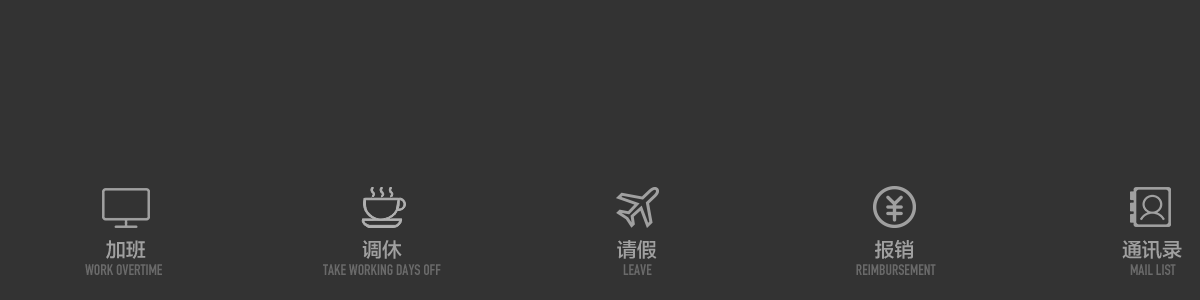
<style>
.page{position:relative;width:1200px;height:300px;background:#333333}
.page>*{position:absolute;margin:0}
.t1{font:20px "FZLTZHK--GBK1-0";color:#a0a0a0;text-transform:uppercase}
.t2{font:15.1px "DINEngschriftStd";color:#6a6a6a;text-transform:uppercase}
.t3{font:15px "DINEngschriftStd";color:#6a6a6a;text-transform:uppercase}
</style>
<div class="page">
<p class="t1" style="left:106px;top:240px;width:40px;height:19px">加班</p>
<p class="t1" style="left:362px;top:240px;width:40px;height:19px">调休</p>
<p class="t1" style="left:617px;top:240px;width:40px;height:19px">请假</p>
<p class="t1" style="left:875px;top:240px;width:39px;height:19px">报销</p>
<p class="t1" style="left:1122px;top:240px;width:60px;height:19px">通讯录</p>
<p class="t2" style="left:85px;top:264px;width:77px;height:11px">Work overtime</p>
<p class="t3" style="left:323px;top:264px;width:118px;height:11px">take working days off</p>
<p class="t3" style="left:623px;top:264px;width:29px;height:11px">Leave</p>
<p class="t3" style="left:856px;top:264px;width:80px;height:11px">Reimbursement</p>
<p class="t2" style="left:1130px;top:264px;width:46px;height:11px">Mail list</p>
</div>
